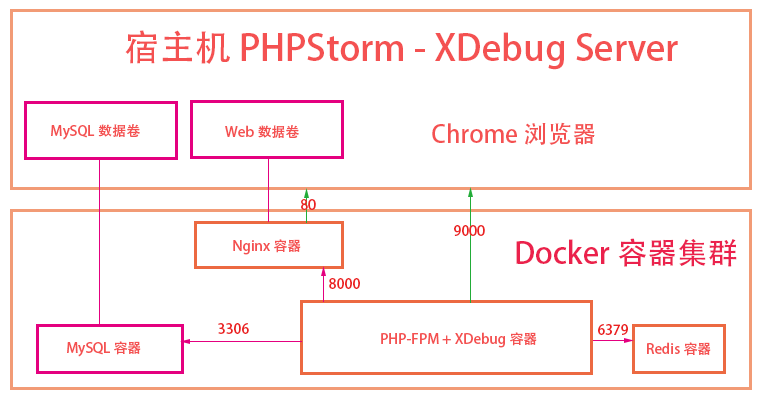
<style>
.page{position:relative;width:763px;height:400px;background:#ffffff}
.page>*{position:absolute;margin:0}
.t1{font:36px "AdobeHeitiStd-Regular";color:#f45151}
.t2{font:14px "AdobeHeitiStd-Regular";color:#f45151}
.t3{font:24px "AdobeHeitiStd-Regular";color:#f45151}
.t4{font:14px "AdobeHeitiStd-Regular";color:#eb2121}
.t5{font:30px "AdobeHeitiStd-Regular";color:#eb214c}
</style>
<div class="page">
<p class="t1" style="left:125px;top:30px;width:553px;height:40px">宿主机 PHPStorm - XDebug Server</p>
<p class="t2" style="left:51px;top:124px;width:89px;height:16px">MySQL数据卷</p>
<p class="t2" style="left:225px;top:125px;width:74px;height:13px">Web数据卷</p>
<p class="t3" style="left:432px;top:122px;width:163px;height:23px">Chrome浏览器</p>
<p class="t4" style="left:301px;top:199px;width:15px;height:11px">80</p>
<p class="t4" style="left:454px;top:225px;width:31px;height:11px">9000</p>
<p class="t2" style="left:233px;top:239px;width:68px;height:16px">Nginx容器</p>
<p class="t5" style="left:516px;top:238px;width:221px;height:29px">Docker容器集群</p>
<p class="t4" style="left:329px;top:278px;width:31px;height:11px">8000</p>
<p class="t4" style="left:218px;top:323px;width:31px;height:11px">3306</p>
<p class="t4" style="left:598px;top:324px;width:30px;height:11px">6379</p>
<p class="t2" style="left:67px;top:341px;width:74px;height:16px">MySQL容器</p>
<p class="t2" style="left:381px;top:332px;width:156px;height:16px">PHP-FPM + XDebug容器</p>
<p class="t2" style="left:647px;top:342px;width:64px;height:14px">Redis容器</p>
</div>
